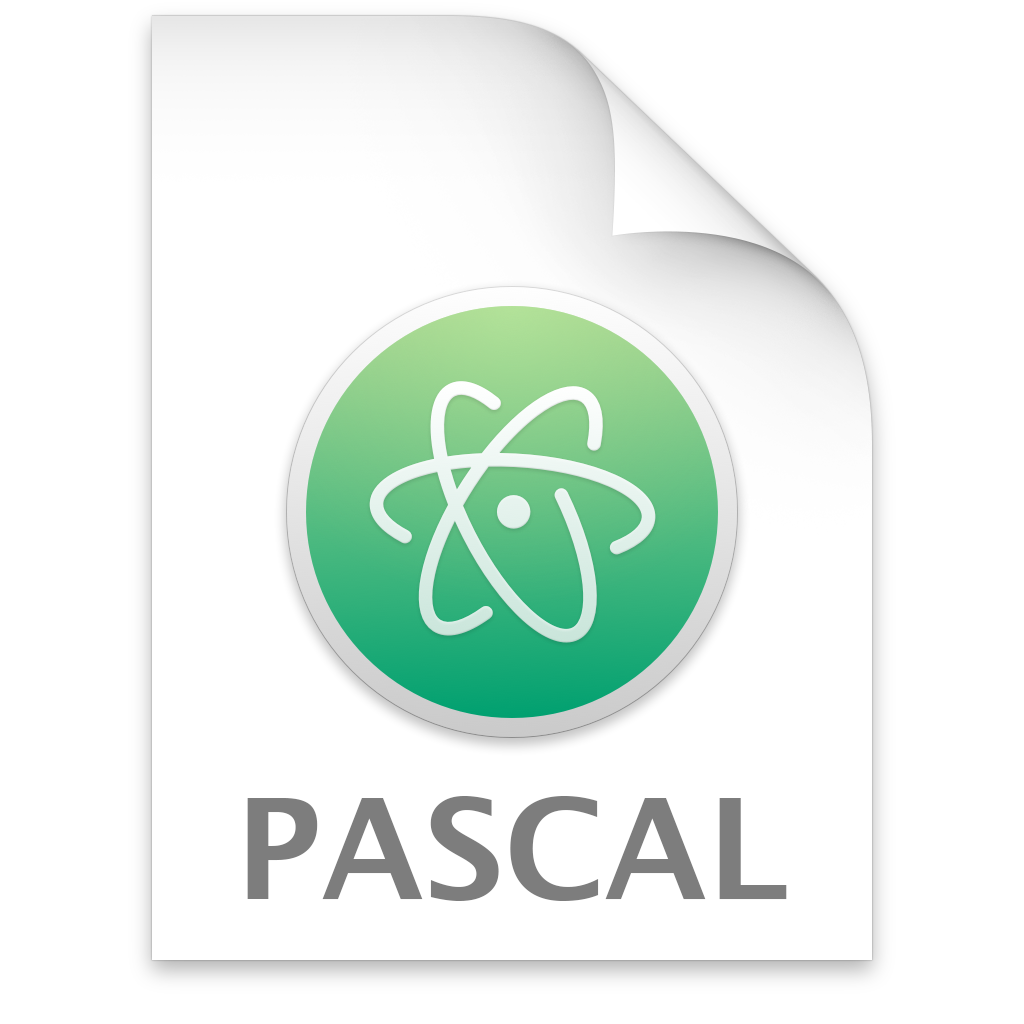
<style>
.page{position:relative;width:1024px;height:1024px;background:#ffffff}
.page>*{position:absolute;margin:0}
.t1{font:140px "LucidaGrande-Bold";color:#7d7d7d}
</style>
<div class="page">
<p class="t1" style="left:247px;top:796px;width:540px;height:105px">PASCAL</p>
</div>
